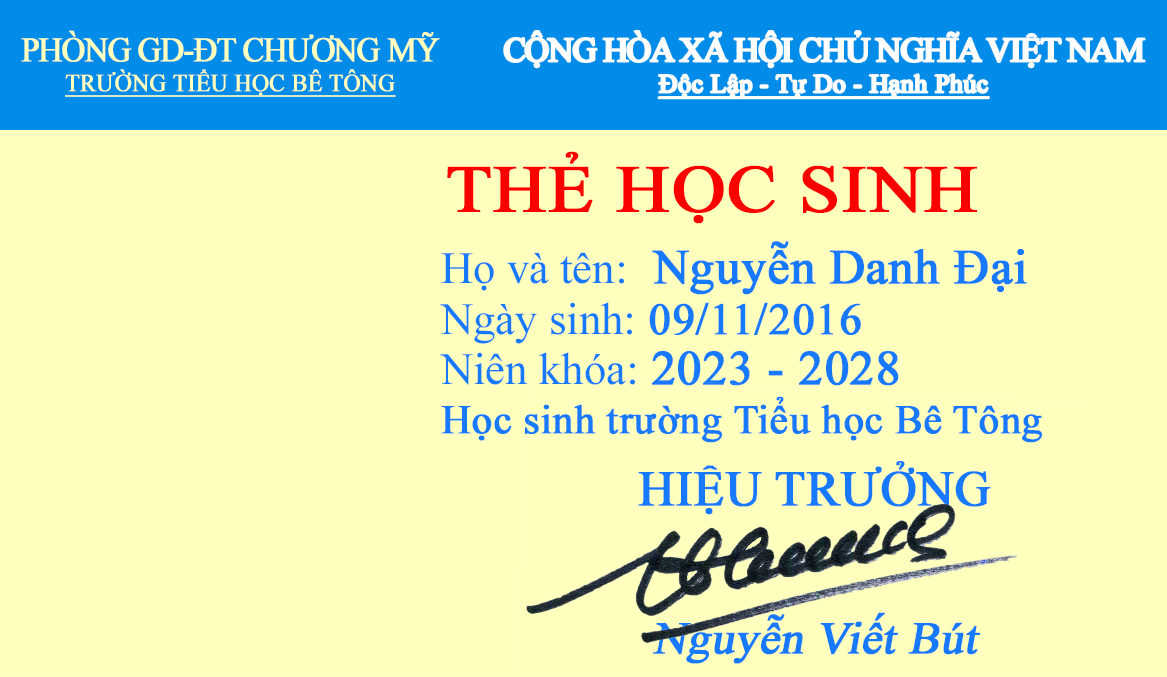
<style>
.page{position:relative;width:1167px;height:677px;background:#ffffbe}
.page>*{position:absolute;margin:0}
.t1{font:24.2px/30.2px "TimesNewRomanPSMT";color:#ffffbe;font-weight:bold;text-decoration:underline;scale:0.96 1}
.t2{font:34.1px/30.2px "TimesNewRomanPSMT";letter-spacing:-0.05em;color:#ffffbe;font-weight:bold;scale:0.96 1}
.t3{font:33.7px "TimesNewRomanPSMT";letter-spacing:-0.05em;color:#ffffff;font-weight:bold}
.t4{font:25.6px "TimesNewRomanPSMT";color:#ffffff;font-weight:bold;text-decoration:underline}
.t5{font:66.7px "TimesNewRomanPSMT";color:#fa0000;font-weight:bold;scale:1.11 1}
.t6{font:40.7px "TimesNewRomanPSMT";color:#1779fe;font-weight:bold}
.t7{font:44.7px/50.8px "TimesNewRomanPSMT";color:#1779fe}
.t8{font:48.8px/50.8px "TimesNewRomanPSMT";color:#1779fe;font-weight:bold}
.t9{font:44.7px/50.8px "TimesNewRomanPSMT";color:#1779fe;font-weight:bold}
.t10{font:45.3px/49.4px "TimesNewRomanPSMT";color:#1779fe;font-weight:bold;font-style:italic}
.t11{font:49.4px/49.4px "TimesNewRomanPSMT";color:#1779fe;font-weight:bold}
</style>
<div class="page">
<p class="t1" style="left:21px;top:30px;width:419px;height:67px;text-align:center"><span class="t2">PHÒNG GD-ĐT CHƯƠNG MỸ<br></span>TRƯỜNG TIỂU HỌC BÊ TÔNG</p>
<p class="t3" style="left:504px;top:31px;width:641px;height:68px;text-align:center">CỘNG HÒA XÃ HỘI CHỦ NGHĨA VIỆT NAM<br><span class="t4">Độc Lập - Tự Do - Hạnh Phúc</span></p>
<p class="t5" style="left:447px;top:151px;width:530px;height:73px">THẺ HỌC SINH</p>
<p class="t6" style="left:440px;top:241px;width:602px;height:202px"><span class="t7">Họ và tên: </span><span class="t8"> Nguyễn Danh Đại<br></span><span class="t7">Ngày sinh:</span><span class="t9"> 09/11/2016<br></span><span class="t7">Niên khóa: </span><span class="t8">2023 - 2028<br></span>Học sinh trường Tiểu học Bê Tông</p>
<p class="t10" style="left:638px;top:461px;width:353px;height:203px;text-align:center"><span class="t11">HIỆU TRƯỞNG<br><br><br></span>Nguyễn Viết Bút</p>
</div>
